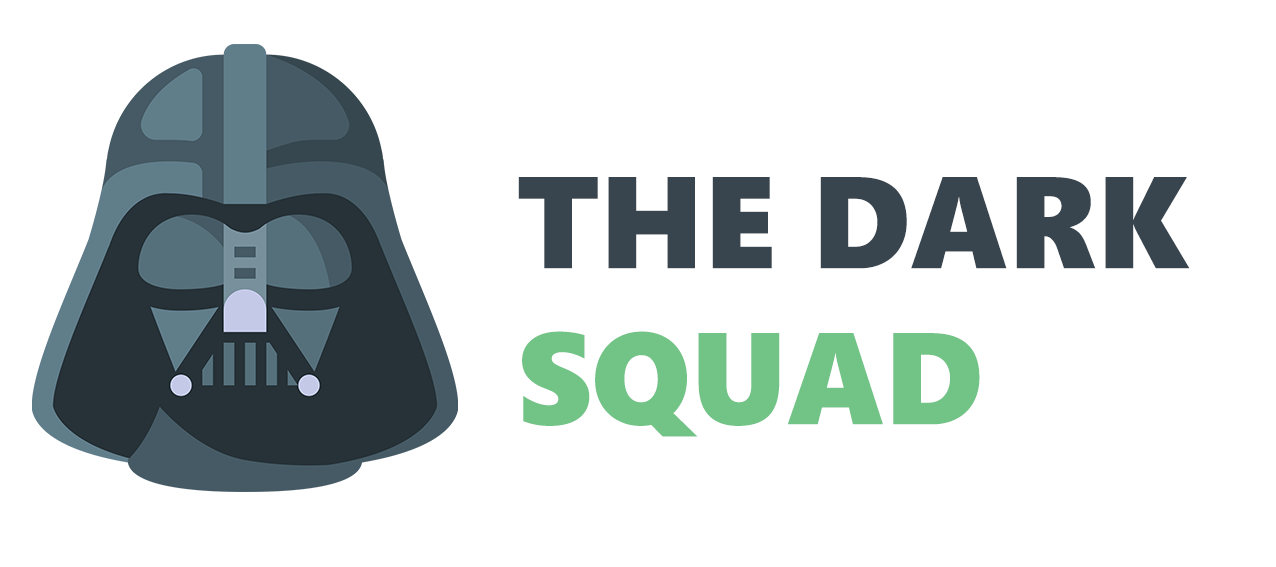
<style>
.page{position:relative;width:1276px;height:567px;background:#ffffff}
.page>*{position:absolute;margin:0}
.t1{font:130px "SegoeUIBlack";color:#38454f;text-transform:uppercase}
.t2{font:130px "SegoeUIBlack";color:#71c386;text-transform:uppercase}
</style>
<div class="page">
<p class="t1" style="left:518px;top:177px;width:672px;height:260px;text-align:right">THE DARK<br><span class="t2">squad</span></p>
</div>
